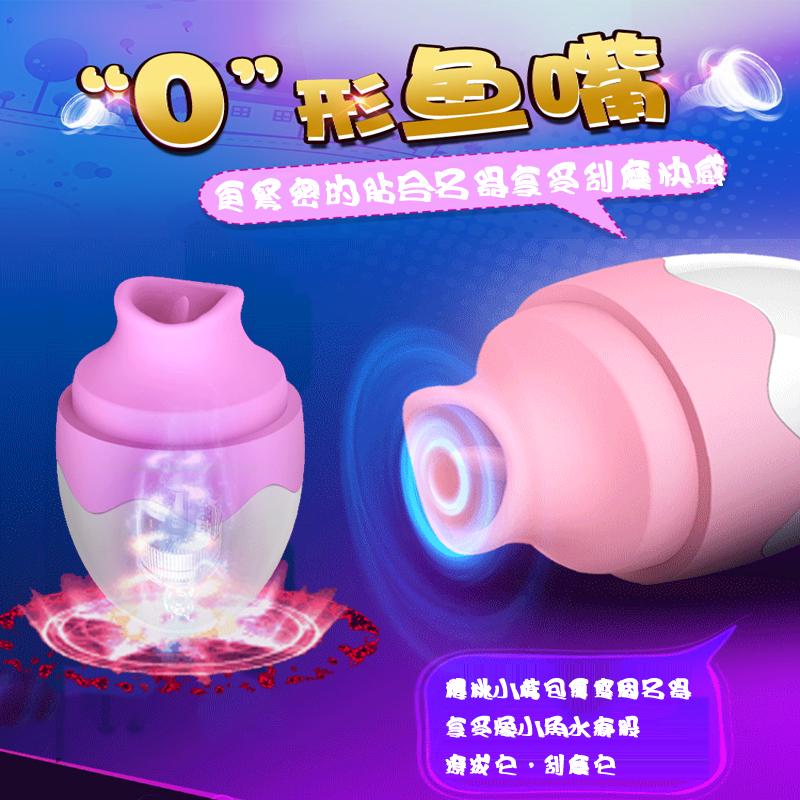
<style>
.page{position:relative;width:800px;height:800px}
.page>*{position:absolute;margin:0}
.t1{font:36px "HanWangCC02";color:#ffffff;font-weight:bold}
.t2{font:24px "HanWangCC02";color:#ffffff;font-weight:bold}
</style>
<div class="page">
<p class="t1" style="left:215px;top:153px;width:511px;height:60px;rotate:-3deg">更緊密的貼合名器享受刮摩快感</p>
<p class="t2" style="left:445px;top:678px;width:247px;height:98px">櫻桃小嘴包覆整個名器<br>享受像小魚水療般<br>撩拔它，刮摩它</p>
</div>
